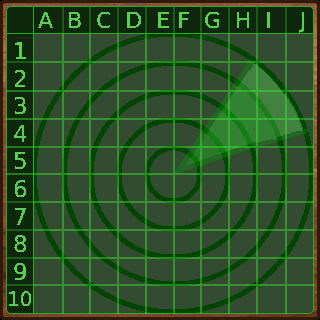
<style>
.page{position:relative;width:320px;height:320px;background:#334b31}
.page>*{position:absolute;margin:0}
.t1{font:22px "DejaVuSans";color:#56d14c}
.t2{font:23px "DejaVuSans";color:#56d14c}
.t3{font:20px "DejaVuSans";color:#56d14c}
</style>
<div class="page">
<p class="t1" style="left:38px;top:11px;width:267px;height:22px">A  B  C  D  E F  G  H  I    J</p>
<p class="t2" style="left:14px;top:42px;width:13px;height:239px">1<br>2<br>3<br>4<br>5<br>6<br>7<br>8<br>9</p>
<p class="t3" style="left:9px;top:291px;width:23px;height:16px">10</p>
</div>
